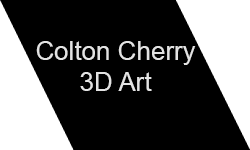
<style>
.page{position:relative;width:250px;height:150px;background:#000000}
.page>*{position:absolute;margin:0}
.t1{font:26px "ArialMT";color:#e3e3e3}
</style>
<div class="page">
<p class="t1" style="left:36px;top:41px;width:160px;height:50px;text-align:center">Colton Cherry<br>3D Art</p>
</div>
